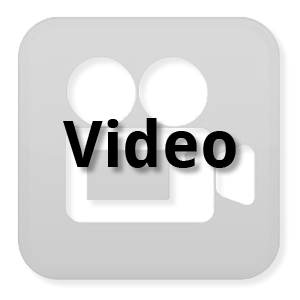
<style>
.page{position:relative;width:300px;height:300px;background:#ffffff}
.page>*{position:absolute;margin:0}
.t1{font:112px "DroidSans-Bold";color:#000000}
</style>
<div class="page">
<p class="t1" style="left:63px;top:118px;width:173px;height:50px">Video</p>
</div>
